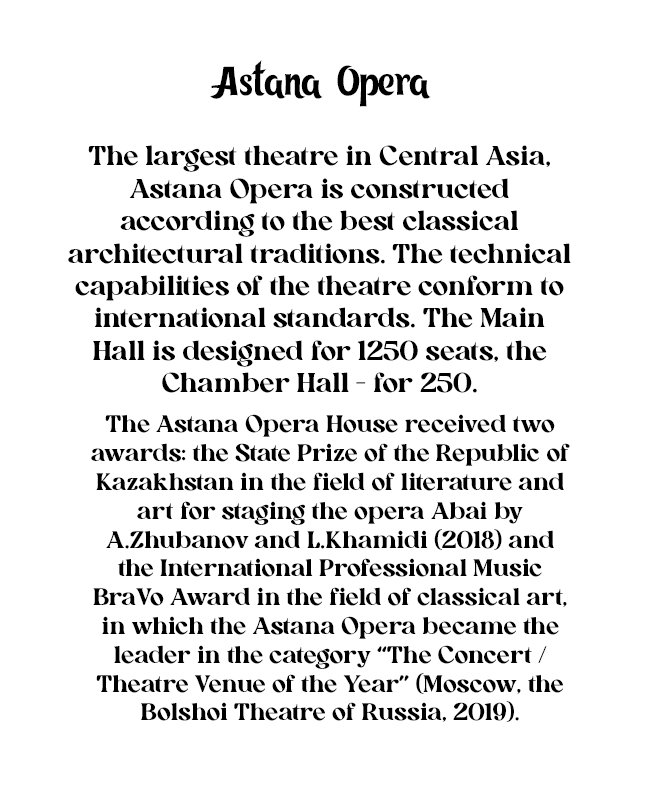
<style>
.page{position:relative;width:654px;height:788px;background:#ffffff}
.page>*{position:absolute;margin:0}
.t1{font:40px "KZ_Tangak-Regular";color:#000000}
.t2{font:27px "AllenoireFreePersonal-Regular";color:#000000}
.t3{font:24px "AllenoireFreePersonal-Regular";color:#000000}
</style>
<div class="page">
<p class="t1" style="left:210px;top:60px;width:221px;height:47px">Astana Opera</p>
<p class="t2" style="left:68px;top:145px;width:503px;height:248px;text-align:center">The largest theatre in Central Asia, Astana Opera is constructed according to the best classical architectural traditions. The technical capabilities of the theatre conform to international standards. The Main Hall is designed for 1250 seats, the Chamber Hall - for 250.</p>
<p class="t3" style="left:91px;top:414px;width:479px;height:308px;text-align:center">The Astana Opera House received two awards: the State Prize of the Republic of Kazakhstan in the field of literature and art for staging the opera Abai by A.Zhubanov and L.Khamidi (2018) and the International Professional Music BraVo Award in the field of classical art, in which the Astana Opera became the leader in the category “The Concert / Theatre Venue of the Year” (Moscow, the Bolshoi Theatre of Russia, 2019).</p>
</div>
